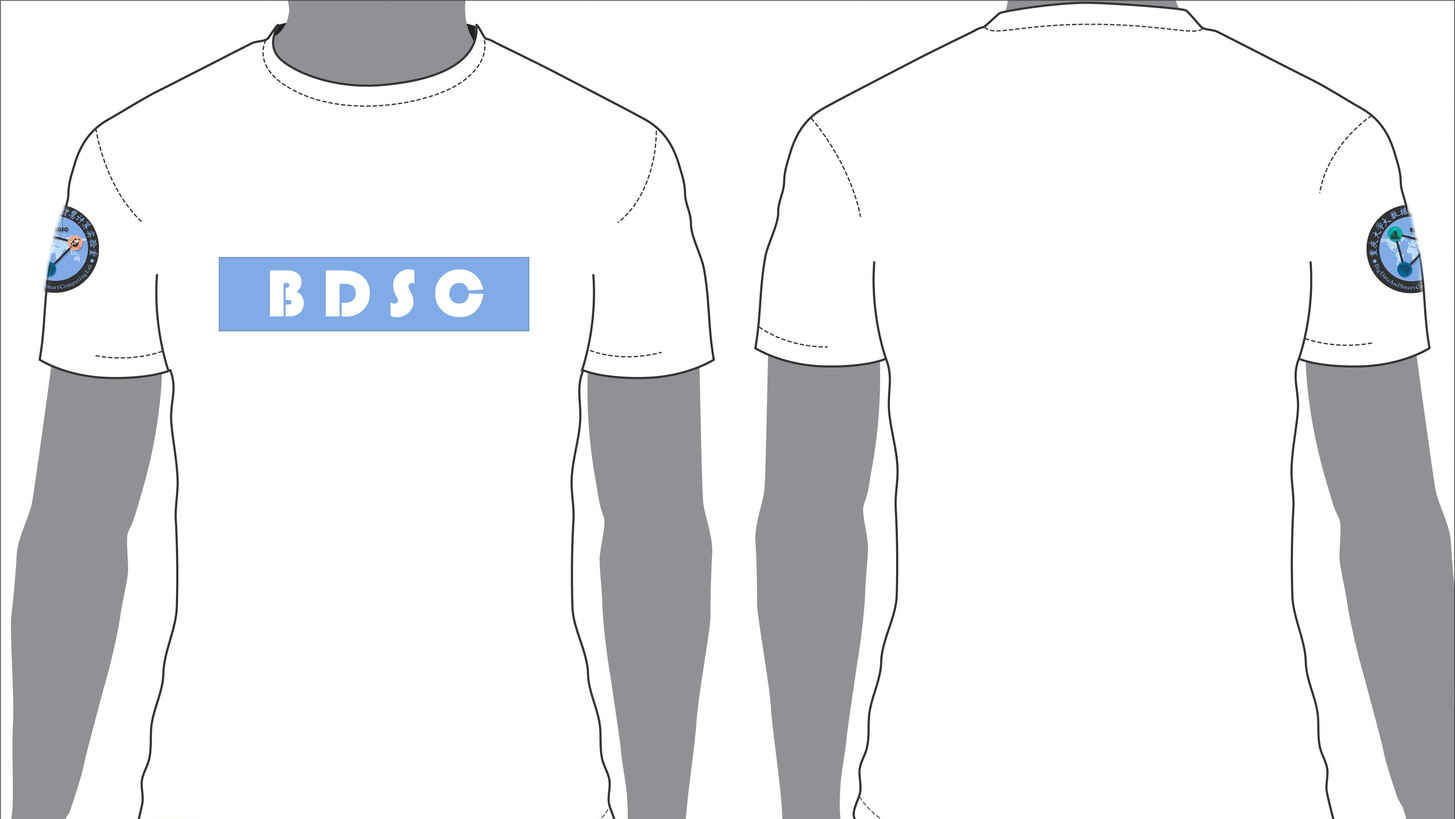
<style>
.page{position:relative;width:1455px;height:819px;background:#ffffff}
.page>*{position:absolute;margin:0}
.t1{font:68.6px "STHupo";color:#ffffff}
</style>
<div class="page">
<p class="t1" style="left:270px;top:270px;width:214px;height:47px">B D S C</p>
</div>
